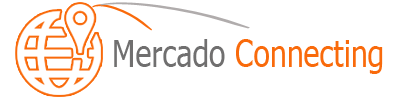
<style>
.page{position:relative;width:400px;height:100px;background:#ffffff}
.page>*{position:absolute;margin:0}
.t1{font:37.1px "Tahoma";color:#f96a0b;scale:0.82 1}
.t2{font:37.1px "Tahoma";color:#706f6f;scale:0.82 1}
</style>
<div class="page">
<p class="t1" style="left:114px;top:39px;width:269px;height:35px"><span class="t2">Mercado </span>Connecting</p>
</div>
